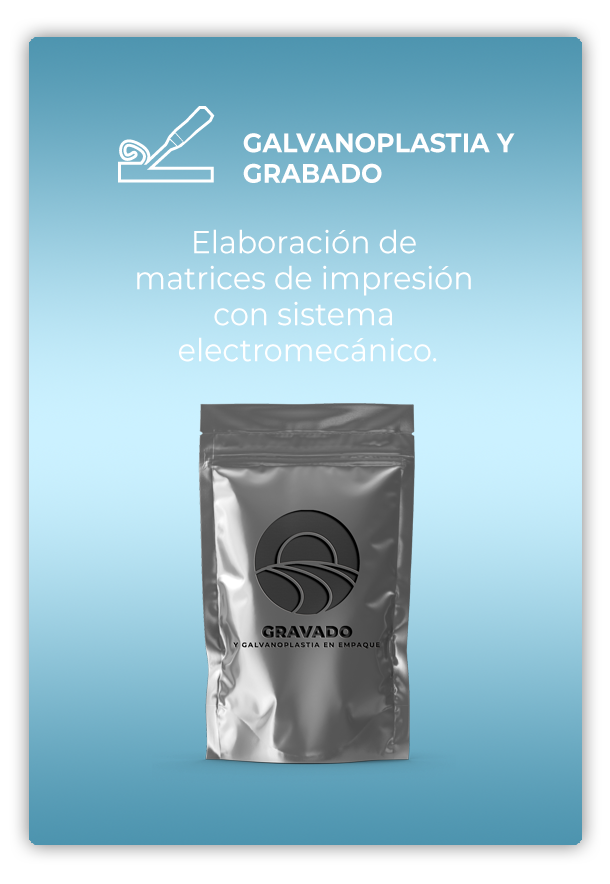
<style>
.page{position:relative;width:610px;height:884px}
.page>*{position:absolute;margin:0}
.t1{font:27px "Montserrat-Bold";letter-spacing:0.004em;color:#ffffff;scale:0.94 1}
.t2{font:31.8px "Montserrat-Regular";letter-spacing:0.004em;color:#ffffff;scale:0.94 1}
</style>
<div class="page">
<p class="t1" style="left:243px;top:133px;width:272px;height:50px">GALVANOPLASTIA Y<br>GRABADO</p>
<p class="t2" style="left:137px;top:229px;width:334px;height:133px;text-align:center">Elaboración de <br>matrices de impresión <br>con sistema <br>electromecánico.</p>
</div>
